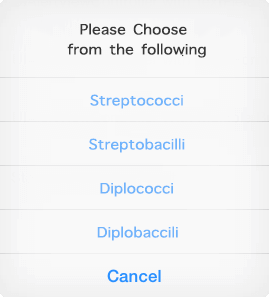
<style>
.page{position:relative;width:269px;height:297px;background:#f9f9f9}
.page>*{position:absolute;margin:0}
.t1{font:19.2px/20px "AppleSymbols";color:#383838;scale:1.12 1}
.t2{font:19.2px "AppleSymbols";color:#70b3fb;scale:1.12 1}
</style>
<div class="page">
<p class="t1" style="left:67px;top:23px;width:139px;height:35px;text-align:center">Please Choose <br>from the following</p>
<p class="t2" style="left:90px;top:94px;width:93px;height:15px">Streptococci</p>
<p class="t2" style="left:89px;top:138px;width:96px;height:15px">Streptobacilli</p>
<p class="t2" style="left:100px;top:182px;width:73px;height:15px">Diplococci</p>
<p class="t2" style="left:97px;top:226px;width:81px;height:15px">Diplobaccili</p>
</div>
